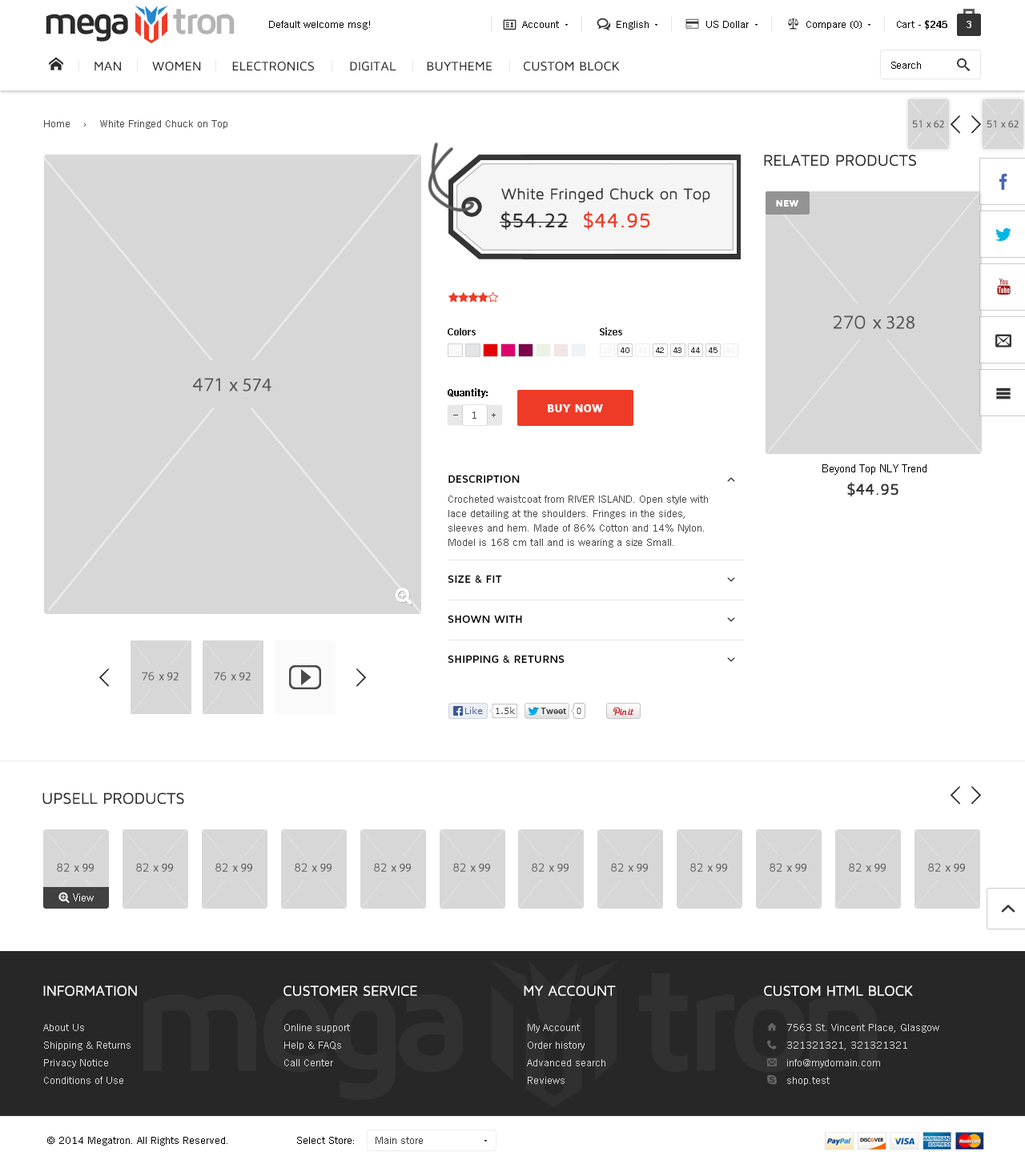
<style>
.page{position:relative;width:1025px;height:1164px;background:#ffffff}
.page>*{position:absolute;margin:0}
.t1{font:38.4px "MavenProBold";letter-spacing:-0.1em;color:#2b2b2b}
.t2{font:38.4px "MavenProBold";letter-spacing:-0.1em;color:#b4b4b4}
.t3{font:10.4px "TradeGothicW01-Roman";color:#000000}
.t4{font:10.4px "TradeGothicW01-Bold2";color:#000000}
.t5{font:9.6px "TradeGothicW01-Bold2";color:#ffffff}
.t6{font:10.4px "TradeGothicW01-Roman";color:#494949}
.t7{font:16px "MavenProRegular";color:#2b2b2b;text-transform:uppercase}
.t8{font:16px "MavenProRegular";color:#353535}
.t9{font:9.6px "MavenProBlack";color:#ffffff}
.t10{font:20.8px "MavenProMedium";color:#353535}
.t11{font:20.8px "MavenProMedium";color:#ee3b27}
.t12{font:10.4px "TradeGothicW01-Bold2";color:#353535}
.t13{font:8px "TradeGothicW01-Roman";color:#efefef;text-transform:uppercase}
.t14{font:8px "TradeGothicW01-Roman";color:#353535;text-transform:uppercase}
.t15{font:8.8px "TradeGothicW01-Bold2";color:#494949}
.t16{font:11.2px "MavenProBlack";color:#ffffff}
.t17{font:11.2px "TradeGothicW01-Roman";color:#000000}
.t18{font:11.2px/40px "MavenProBold";color:#000000;text-transform:uppercase}
.t19{font:11.2px/60px "MavenProBold";color:#000000;text-transform:uppercase}
.t20{font:16px "MavenProMedium";color:#353535}
.t21{font:10.4px/14.4px "TradeGothicW01-Roman";color:#494949}
.t22{font:11.2px "TradeGothicW01-Roman";color:#ffffff}
.t23{font:14.4px "MavenProRegular";color:#ffffff;text-transform:uppercase}
.t24{font:10.4px/17.6px "TradeGothicW01-Roman";color:#d9d9d9}
.t25{font:10.4px "TradeGothicW01-Roman";color:#3c3c3c}
</style>
<div class="page">
<p class="t1" style="left:46px;top:9px;width:189px;height:33px">mega     <span class="t2">tron</span></p>
<p class="t3" style="left:269px;top:21px;width:101px;height:9px">Default welcome msg!</p>
<p class="t3" style="left:522px;top:21px;width:37px;height:7px">Account</p>
<p class="t3" style="left:616px;top:21px;width:32px;height:9px">English</p>
<p class="t3" style="left:706px;top:21px;width:42px;height:7px">US Dollar</p>
<p class="t3" style="left:806px;top:21px;width:55px;height:9px">Compare (0)</p>
<p class="t3" style="left:896px;top:20px;width:51px;height:10px">Cart - <span class="t4">$245</span></p>
<p class="t5" style="left:966px;top:21px;width:5px;height:7px">3</p>
<p class="t3" style="left:891px;top:62px;width:30px;height:7px">Search</p>
<p class="t6" style="left:44px;top:120px;width:183px;height:9px">Home    ›    White Fringed Chuck on Top</p>
<p class="t7" style="left:764px;top:154px;width:152px;height:12px">Related PRODUCTS</p>
<p class="t8" style="left:501px;top:188px;width:209px;height:15px">White Fringed Chuck on Top</p>
<p class="t9" style="left:776px;top:200px;width:22px;height:7px">NEW</p>
<p class="t10" style="left:499px;top:211px;width:151px;height:19px">$54.22  <span class="t11">$44.95</span></p>
<p class="t12" style="left:447px;top:328px;width:28px;height:7px">Colors</p>
<p class="t12" style="left:600px;top:327px;width:22px;height:8px">Sizes</p>
<p class="t13" style="left:603px;top:347px;width:9px;height:6px">39</p>
<p class="t14" style="left:620px;top:347px;width:9px;height:6px">40</p>
<p class="t13" style="left:638px;top:347px;width:8px;height:6px">41</p>
<p class="t14" style="left:656px;top:347px;width:8px;height:6px">42</p>
<p class="t14" style="left:673px;top:347px;width:8px;height:6px">43</p>
<p class="t14" style="left:691px;top:347px;width:9px;height:6px">44</p>
<p class="t14" style="left:708px;top:347px;width:9px;height:6px">45</p>
<p class="t13" style="left:725px;top:347px;width:9px;height:6px">46</p>
<p class="t4" style="left:447px;top:388px;width:40px;height:10px">Quantity:</p>
<p class="t6" style="left:472px;top:411px;width:4px;height:8px">1</p>
<p class="t15" style="left:491px;top:413px;width:4px;height:4px">+</p>
<p class="t16" style="left:548px;top:404px;width:55px;height:8px">BUY NOW</p>
<p class="t17" style="left:822px;top:464px;width:104px;height:11px">Beyond Top NLY Trend</p>
<p class="t18" style="left:447px;top:475px;width:117px;height:188px">Description<br><br><span class="t19">Size &amp; Fit<br></span>Shown With<br>Shipping &amp; Returns</p>
<p class="t20" style="left:847px;top:482px;width:51px;height:15px">$44.95</p>
<p class="t21" style="left:448px;top:495px;width:260px;height:53px">Crocheted waistcoat from RIVER ISLAND. Open style with lace detailing at the shoulders. Fringes in the sides, sleeves and hem. Made of 86% Cotton and 14% Nylon. Model is 168 cm tall and is wearing a size Small.</p>
<p class="t7" style="left:42px;top:792px;width:142px;height:12px">UPSELL PRODUCTS</p>
<p class="t22" style="left:73px;top:893px;width:21px;height:8px">View</p>
<p class="t23" style="left:43px;top:985px;width:94px;height:11px">Information</p>
<p class="t23" style="left:283px;top:985px;width:134px;height:11px">customer service</p>
<p class="t23" style="left:523px;top:985px;width:93px;height:11px">My account</p>
<p class="t23" style="left:764px;top:985px;width:149px;height:11px">CUSTOM HTML BLOCK</p>
<p class="t24" style="left:43px;top:1024px;width:87px;height:60px">About Us<br>Shipping &amp; Returns<br>Privacy Notice<br>Conditions of Use</p>
<p class="t24" style="left:284px;top:1024px;width:66px;height:42px">Online support<br>Help &amp; FAQs<br>Call Center</p>
<p class="t24" style="left:527px;top:1024px;width:78px;height:60px">My Account<br>Order history<br>Advanced search<br>Reviews</p>
<p class="t24" style="left:787px;top:1024px;width:152px;height:61px">7563 St. Vincent Place, Glasgow<br>321321321, 321321321<br>info@mydomain.com<br>shop.test</p>
<p class="t3" style="left:47px;top:1137px;width:180px;height:8px">© 2014 Megatron. All Rights Reserved.</p>
<p class="t3" style="left:297px;top:1137px;width:57px;height:7px">Select Store:</p>
<p class="t25" style="left:375px;top:1137px;width:48px;height:7px">Main store</p>
</div>
